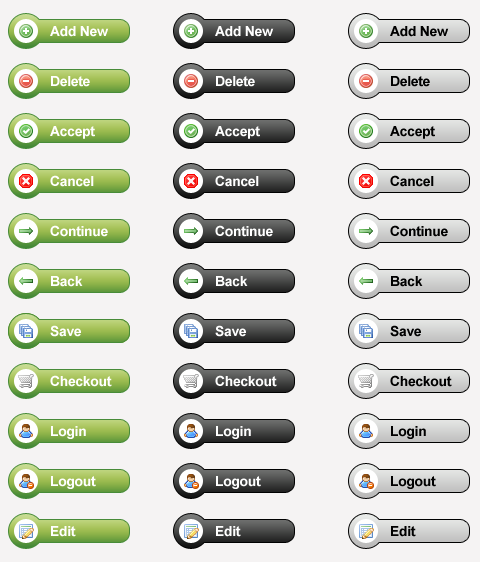
<style>
.page{position:relative;width:480px;height:562px;background:#f5f3f3}
.page>*{position:absolute;margin:0}
.t1{font:14px "Arial-BoldMT";letter-spacing:-0.025em;color:#ffffff}
.t2{font:14px "Arial-BoldMT";letter-spacing:-0.025em;color:#000000}
.t3{font:14px "Arial-BoldMT";letter-spacing:-0.025em}
</style>
<div class="page">
<p class="t1" style="left:50px;top:26px;width:59px;height:11px">Add New</p>
<p class="t1" style="left:215px;top:26px;width:59px;height:11px">Add New</p>
<p class="t2" style="left:390px;top:26px;width:59px;height:11px">Add New</p>
<p class="t1" style="left:51px;top:76px;width:39px;height:11px">Delete</p>
<p class="t1" style="left:216px;top:76px;width:39px;height:11px">Delete</p>
<p class="t2" style="left:391px;top:76px;width:39px;height:11px">Delete</p>
<p class="t1" style="left:50px;top:126px;width:45px;height:13px">Accept</p>
<p class="t1" style="left:215px;top:126px;width:45px;height:13px">Accept</p>
<p class="t2" style="left:390px;top:126px;width:45px;height:13px">Accept</p>
<p class="t1" style="left:50px;top:175px;width:44px;height:12px">Cancel</p>
<p class="t1" style="left:215px;top:175px;width:44px;height:12px">Cancel</p>
<p class="t2" style="left:390px;top:175px;width:44px;height:12px">Cancel</p>
<p class="t1" style="left:50px;top:225px;width:58px;height:12px">Continue</p>
<p class="t1" style="left:215px;top:225px;width:58px;height:12px">Continue</p>
<p class="t2" style="left:390px;top:225px;width:58px;height:12px">Continue</p>
<p class="t1" style="left:51px;top:276px;width:32px;height:11px">Back</p>
<p class="t1" style="left:216px;top:276px;width:32px;height:11px">Back</p>
<p class="t2" style="left:391px;top:276px;width:32px;height:11px">Back</p>
<p class="t1" style="left:50px;top:325px;width:31px;height:12px">Save</p>
<p class="t3" style="left:51px;top:325px;width:25px;height:12px">Edit</p>
<p class="t1" style="left:215px;top:325px;width:31px;height:12px">Save</p>
<p class="t2" style="left:390px;top:325px;width:31px;height:12px">Save</p>
<p class="t1" style="left:50px;top:375px;width:62px;height:12px">Checkout</p>
<p class="t1" style="left:215px;top:375px;width:62px;height:12px">Checkout</p>
<p class="t2" style="left:390px;top:375px;width:62px;height:12px">Checkout</p>
<p class="t1" style="left:51px;top:426px;width:35px;height:13px">Login</p>
<p class="t1" style="left:216px;top:426px;width:35px;height:13px">Login</p>
<p class="t2" style="left:391px;top:426px;width:35px;height:13px">Login</p>
<p class="t1" style="left:51px;top:476px;width:45px;height:13px">Logout</p>
<p class="t1" style="left:216px;top:476px;width:45px;height:13px">Logout</p>
<p class="t2" style="left:391px;top:476px;width:45px;height:13px">Logout</p>
<p class="t1" style="left:51px;top:526px;width:25px;height:11px">Edit</p>
<p class="t1" style="left:216px;top:526px;width:25px;height:11px">Edit</p>
<p class="t2" style="left:391px;top:526px;width:25px;height:11px">Edit</p>
</div>
